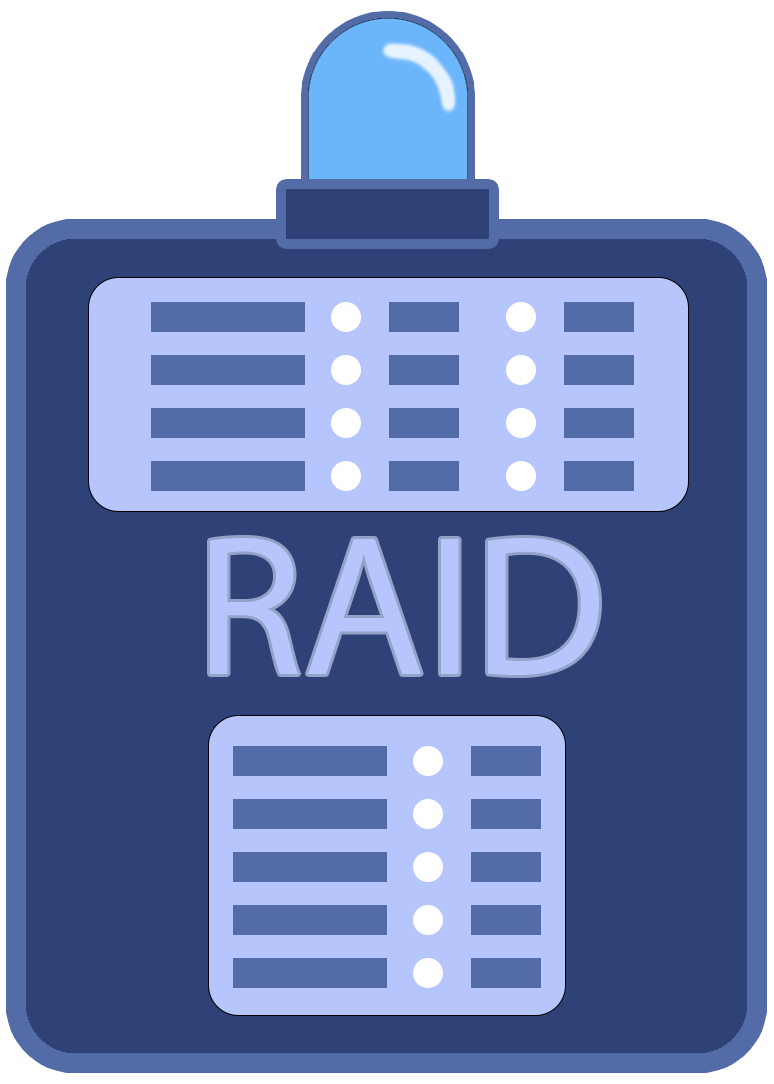
<style>
.page{position:relative;width:774px;height:1084px;background:#2e4277}
.page>*{position:absolute;margin:0}
.t1{font:200px "MyriadPro-Regular";color:#b7c5fd}
</style>
<div class="page">
<p class="t1" style="left:210px;top:537px;width:389px;height:138px">RAID</p>
</div>
